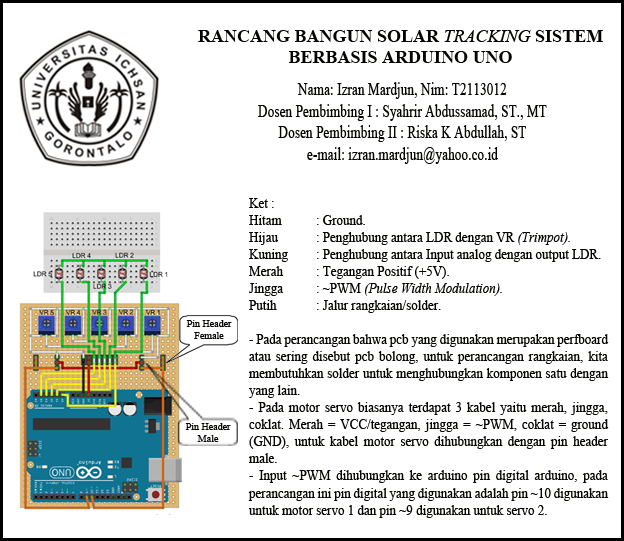
<style>
.page{position:relative;width:624px;height:541px;background:#ffffff}
.page>*{position:absolute;margin:0}
.t1{font:18px "TimesNewRomanPS-BoldMT";color:#040400}
.t2{font:18px "TimesNewRomanPS-ItalicMT";color:#040400}
.t3{font:18px "TimesNewRomanPSMT";color:#040400;scale:0.74 1}
.t4{font:14.2px "TimesNewRomanPSMT";color:#040400;scale:0.92 1}
.t5{font:14.2px "TimesNewRomanPS-ItalicMT";color:#040400;scale:0.92 1}
.t6{font:10px "TimesNewRomanPSMT";color:#040400}
</style>
<div class="page">
<p class="t1" style="left:198px;top:30px;width:405px;height:33px;text-align:center">RANCANG BANGUN SOLAR <span class="t2">TRACKING </span>SISTEM<br>BERBASIS ARDUINO UNO</p>
<p class="t3" style="left:258px;top:82px;width:289px;height:82px;text-align:center">Nama: Izran Mardjun, Nim: T2113012<br>Dosen Pembimbing I : Syahrir Abdussamad, ST., MT<br>Dosen Pembimbing II : Riska K Abdullah, ST<br>e-mail: izran.mardjun@yahoo.co.id</p>
<p class="t4" style="left:248px;top:198px;width:361px;height:320px;text-align:justify">Ket :<br>Hitam  : Ground.<br>Hijau  : Penghubung antara LDR dengan VR<span class="t5"> (Trimpot).<br></span>Kuning : Penghubung antara Input analog dengan output LDR.<br>Merah : Tegangan Positif (+5V).<br>Jingga : ~PWM <span class="t5">(Pulse Width Modulation).<br></span>Putih  : Jalur rangkaian/solder.<br><br>- Pada perancangan bahwa pcb yang digunakan merupakan perfboard atau sering disebut pcb bolong, untuk perancangan rangkaian, kita membutuhkan solder untuk menghubungkan komponen satu dengan yang lain.<br>- Pada motor servo biasanya terdapat 3 kabel yaitu merah, jingga, coklat. Merah = VCC/tegangan, jingga = ~PWM, coklat = ground (GND), untuk kabel motor servo dihubungkan dengan pin header male.<br>- Input ~PWM dihubungkan ke arduino pin digital arduino, pada perancangan ini pin digital yang digunakan adalah pin ~10 digunakan untuk motor servo 1 dan pin ~9 digunakan untuk servo 2.</p>
<p class="t6" style="left:186px;top:320px;width:46px;height:19px;text-align:center">Pin Header<br>Female</p>
<p class="t6" style="left:185px;top:423px;width:46px;height:19px;text-align:center">Pin Header<br>Male</p>
</div>
